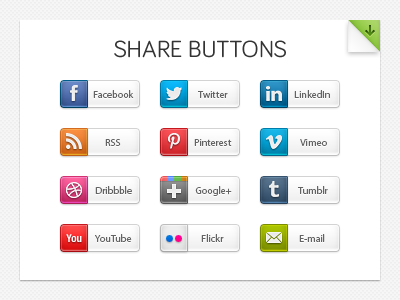
<style>
.page{position:relative;width:400px;height:300px;background:#ffffff}
.page>*{position:absolute;margin:0}
.t1{font:10px "MyriadPro-Regular";color:#636363}
</style>
<div class="page">
<p class="t1" style="left:93px;top:90px;width:41px;height:8px">Facebook</p>
<p class="t1" style="left:198px;top:91px;width:30px;height:7px">Twitter</p>
<p class="t1" style="left:294px;top:90px;width:36px;height:8px">LinkedIn</p>
<p class="t1" style="left:105px;top:139px;width:16px;height:7px">RSS</p>
<p class="t1" style="left:194px;top:139px;width:38px;height:7px">Pinterest</p>
<p class="t1" style="left:300px;top:139px;width:27px;height:7px">Vimeo</p>
<p class="t1" style="left:95px;top:186px;width:37px;height:8px">Dribbble</p>
<p class="t1" style="left:195px;top:186px;width:37px;height:10px">Google+</p>
<p class="t1" style="left:298px;top:186px;width:30px;height:8px">Tumblr</p>
<p class="t1" style="left:95px;top:234px;width:37px;height:8px">YouTube</p>
<p class="t1" style="left:201px;top:234px;width:23px;height:8px">Flickr</p>
<p class="t1" style="left:299px;top:234px;width:26px;height:8px">E-mail</p>
</div>
